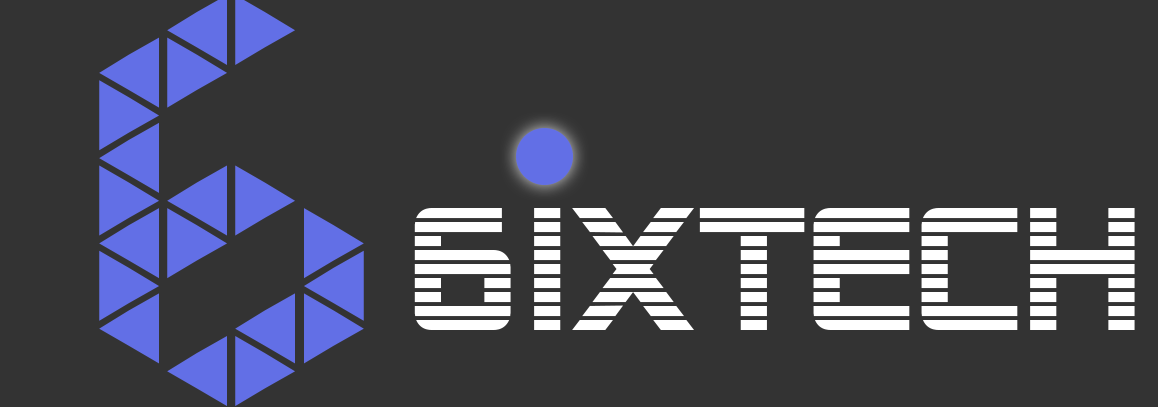
<style>
.page{position:relative;width:1158px;height:407px;background:#333333}
.page>*{position:absolute;margin:0}
.t1{font:173.9px "SFAlienEncounters";color:#fefefe;text-transform:uppercase}
</style>
<div class="page">
<p class="t1" style="left:414px;top:208px;width:721px;height:122px">6ixtech</p>
</div>
